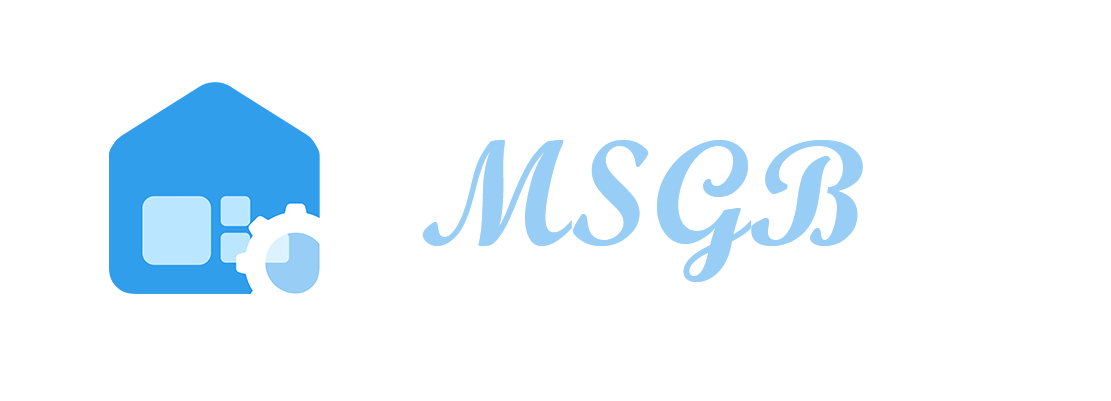
<style>
.page{position:relative;width:1111px;height:401px;background:#ffffff}
.page>*{position:absolute;margin:0}
.t1{font:150px "ScriptMTBold";color:#98cef5}
</style>
<div class="page">
<p class="t1" style="left:422px;top:140px;width:441px;height:142px">MSGB</p>
</div>
